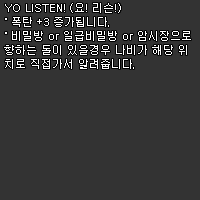
<style>
.page{position:relative;width:200px;height:200px;background:#333333}
.page>*{position:absolute;margin:0}
.t1{font:11px/14px "Dotum";color:#ffffff}
</style>
<div class="page">
<p class="t1" style="left:4px;top:3px;width:187px;height:66px">YO LISTEN! (요! 리슨!)<br>˚ 폭탄 +3 증가됩니다.<br>˚ 비밀방 or 일급비밀방 or 암시장으로<br>향하는 돌이 있을경우 나비가 해당 위<br>치로 직접가서 알려줍니다.</p>
</div>
